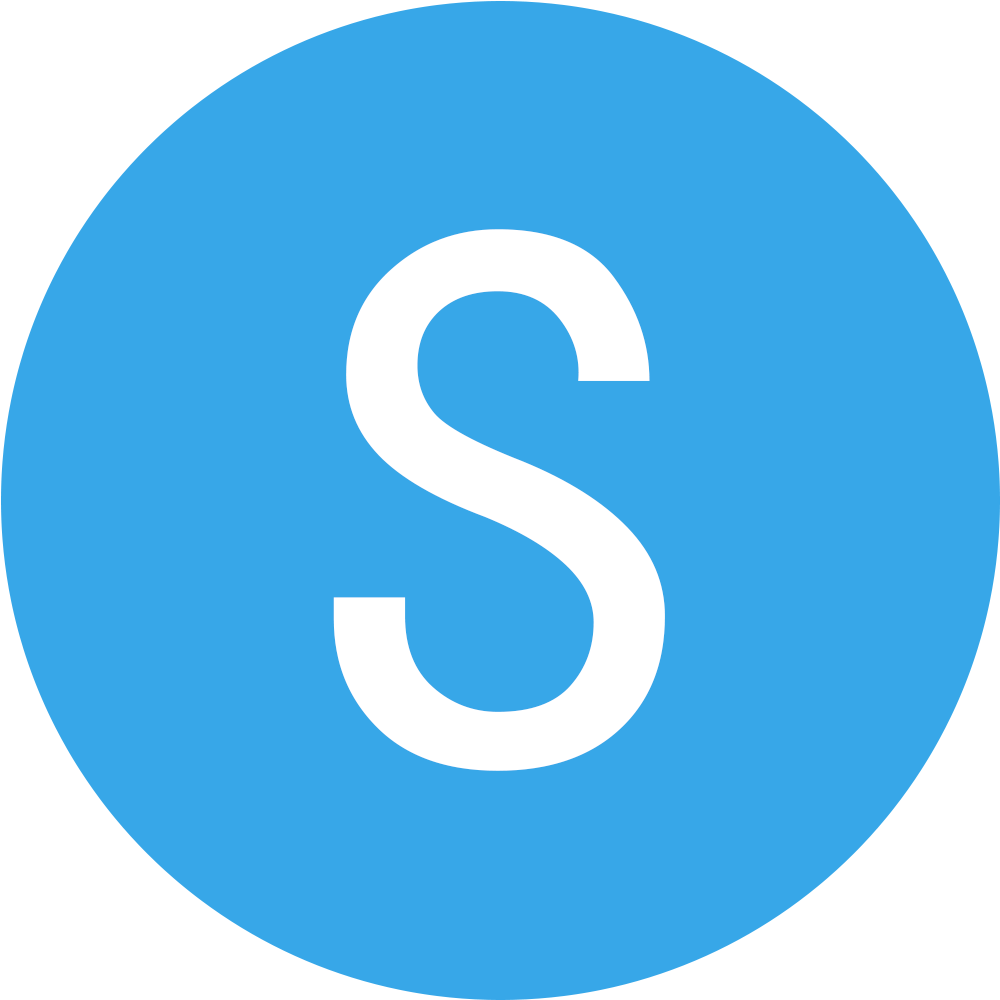
<style>
.page{position:relative;width:1000px;height:1000px;background:#37a7e8}
.page>*{position:absolute;margin:0}
.t1{font:791.7px "SimHei";letter-spacing:-0.05em;color:#ffffff}
</style>
<div class="page">
<p class="t1" style="left:333px;top:229px;width:332px;height:542px">S</p>
</div>
